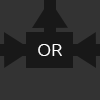
<style>
.page{position:relative;width:100px;height:100px;background:#333333}
.page>*{position:absolute;margin:0}
.t1{font:18px "Ubuntu-Light";color:#ffffff}
</style>
<div class="page">
<p class="t1" style="left:38px;top:44px;width:24px;height:12px">OR</p>
</div>
